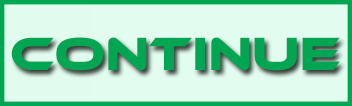
<style>
.page{position:relative;width:352px;height:106px;background:#e2fcef}
.page>*{position:absolute;margin:0}
.t1{font:48px "EthnocentricRg-Regular";color:#00a651}
</style>
<div class="page">
<p class="t1" style="left:11px;top:37px;width:329px;height:34px">continue</p>
</div>
